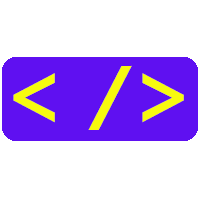
<style>
.page{position:relative;width:200px;height:200px;background:#ffffff}
.page>*{position:absolute;margin:0}
.t1{font:91.7px "ZupraSans-Normal";color:#f7fa0f}
</style>
<div class="page">
<p class="t1" style="left:13px;top:65px;width:171px;height:65px">&lt; /&gt;</p>
</div>
